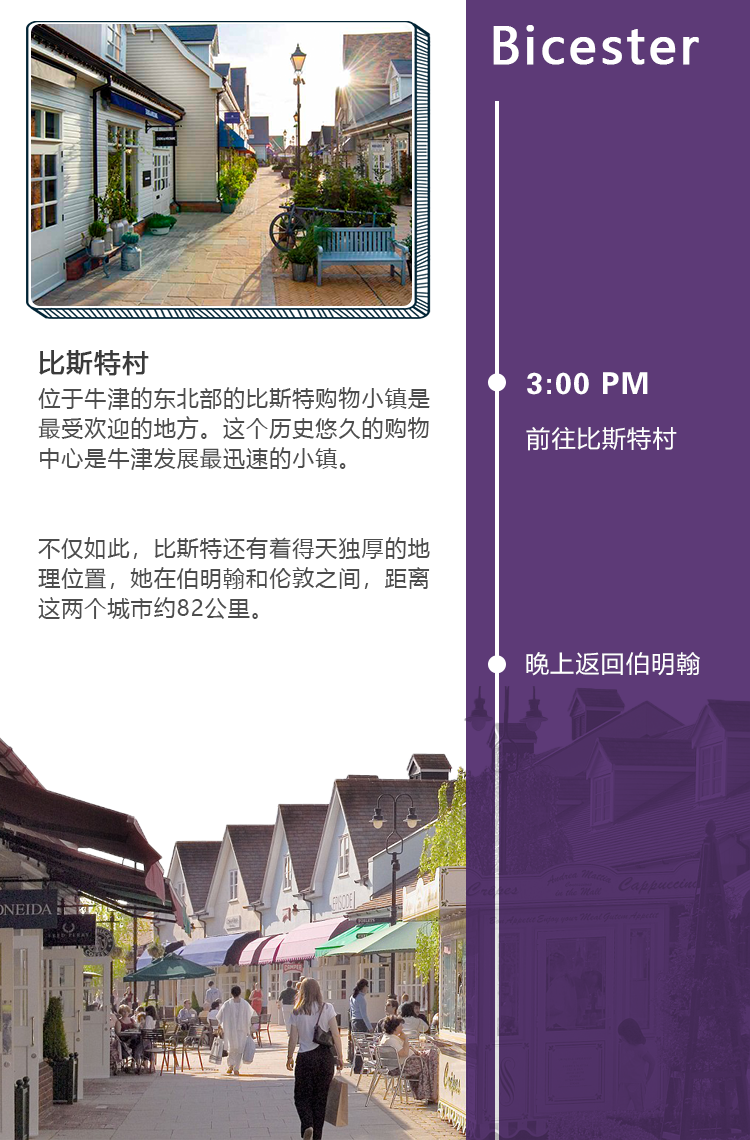
<style>
.page{position:relative;width:750px;height:1140px;background:#ffffff}
.page>*{position:absolute;margin:0}
.t1{font:48.8px "MicrosoftYaHei";letter-spacing:0.05em;color:#ffffff;font-weight:bold}
.t2{font:22px/30px "MicrosoftYaHei";letter-spacing:0.05em;color:#4d4d4d}
.t3{font:26px/37.5px "MicrosoftYaHei";letter-spacing:0.05em;color:#3b3b3b;font-weight:bold}
.t4{font:29.9px "FZZYJW--GB1-0";letter-spacing:0.05em;color:#ffffff}
.t5{font:23.9px "MicrosoftYaHei";letter-spacing:0.05em;color:#ffffff}
.t6{font:24px "MicrosoftYaHei";letter-spacing:0.05em;color:#ffffff}
</style>
<div class="page">
<p class="t1" style="left:493px;top:25px;width:206px;height:40px">Bicester</p>
<p class="t2" style="left:38px;top:350px;width:392px;height:269px"><span class="t3">比斯特村<br></span>位于牛津的东北部的比斯特购物小镇是<br>最受欢迎的地方。这个历史悠久的购物<br>中心是牛津发展最迅速的小镇。<br><br><br>不仅如此，比斯特还有着得天独厚的地<br>理位置，她在伯明翰和伦敦之间，距离<br>这两个城市约82公里。</p>
<p class="t4" style="left:527px;top:372px;width:121px;height:23px">3:00 PM</p>
<p class="t5" style="left:526px;top:427px;width:151px;height:24px">前往比斯特村</p>
<p class="t6" style="left:526px;top:652px;width:174px;height:24px">晚上返回伯明翰</p>
</div>
